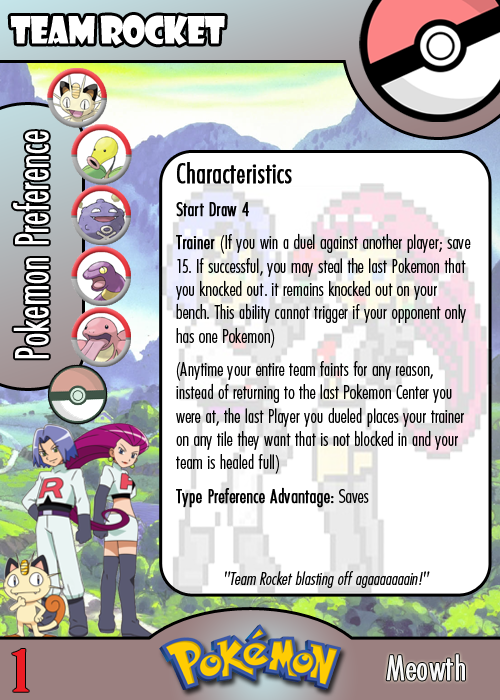
<style>
.page{position:relative;width:500px;height:700px}
.page>*{position:absolute;margin:0}
.t1{font:36.7px "ShowcardGothic-Reg";letter-spacing:-0.025em;color:#ffffff;scale:0.91 1}
.t2{font:46.7px "FuturaCondensedBQ-Light";color:#ffffff;font-weight:bold;scale:0.83 1}
.t3{font:19.4px "FuturaCondensedBQ-Light";color:#010101}
.t4{font:27.8px "FuturaCondensedBQ-Light";color:#010101;font-weight:bold}
.t5{font:19.4px "FuturaCondensedBQ-Light";color:#010101;font-weight:bold}
.t6{font:18.1px "FuturaCondensedBQ-Light";color:#010101;font-style:italic}
.t7{font:55.6px "BirchStd";color:#ed1c24;font-weight:bold;scale:1.5 1}
.t8{font:34.5px "FuturaCondensedBQ-Light";color:#f9f9f9;font-weight:bold}
</style>
<div class="page">
<p class="t1" style="left:10px;top:15px;width:215px;height:31px">Team Rocket</p>
<p class="t2" style="left:13px;top:131px;width:36px;height:228px;rotate:-90deg">Pokemon Preference</p>
<p class="t3" style="left:176px;top:162px;width:295px;height:346px"><span class="t4">Characteristics<br><br></span><span class="t5">Start Draw 4<br><br>Trainer </span>(If you win a duel against another player; save 15. If successful, you may steal the last Pokemon that you knocked out. it remains knocked out on your bench. This ability cannot trigger if your opponent only has one Pokemon)<br><br>(Anytime your entire team faints for any reason, instead of returning to the last Pokemon Center you were at, the last Player you dueled places your trainer on any tile they want that is not blocked in and your team is healed full)<br><br><span class="t5">Type Preference Advantage:</span> Saves</p>
<p class="t6" style="left:225px;top:571px;width:205px;height:17px">"Team Rocket blasting off agaaaaaaain!"</p>
<p class="t7" style="left:12px;top:649px;width:17px;height:43px">1</p>
<p class="t8" style="left:386px;top:654px;width:79px;height:27px">Meowth</p>
</div>
